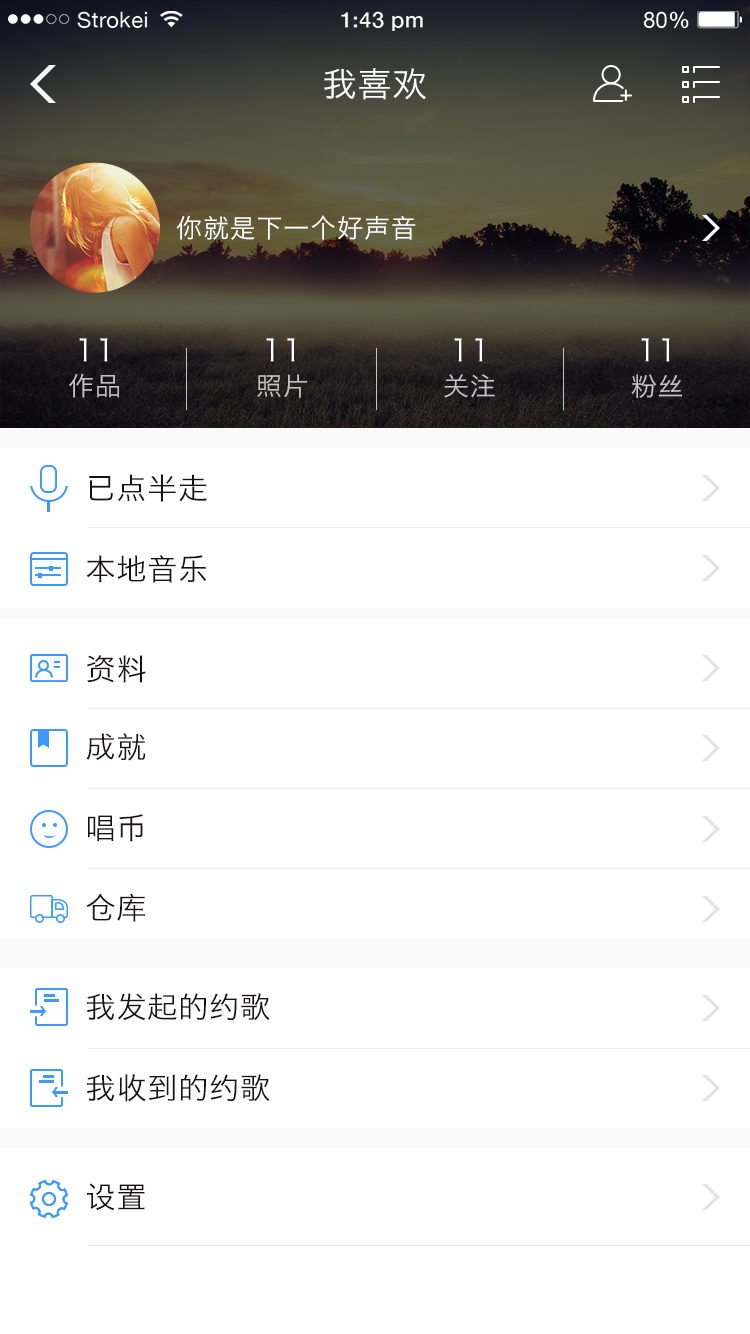
<style>
.page{position:relative;width:750px;height:1334px;background:#ffffff}
.page>*{position:absolute;margin:0}
.t1{font:34px "HiraginoSansGB-W3";letter-spacing:0.03em;color:#ffffff}
.t2{font:26px "HiraginoSansGB-W3";letter-spacing:0.03em;color:#ffffff}
.t3{font:30px "HiraginoSansGB-W3";letter-spacing:0.03em;color:#ffffff}
.t4{font:25.5px "HiraginoSansGB-W3";letter-spacing:0.03em;color:#c3c3c3}
.t5{font:25.8px "HiraginoSansGB-W3";letter-spacing:0.03em;color:#c3c3c3}
.t6{font:30px "HiraginoSansGB-W3";letter-spacing:0.03em;color:#161214}
</style>
<div class="page">
<p class="t1" style="left:324px;top:68px;width:102px;height:32px">我喜欢</p>
<p class="t2" style="left:176px;top:215px;width:240px;height:25px">你就是下一个好声音</p>
<p class="t3" style="left:79px;top:338px;width:29px;height:24px">11</p>
<p class="t3" style="left:266px;top:338px;width:29px;height:24px">11</p>
<p class="t3" style="left:454px;top:338px;width:29px;height:24px">11</p>
<p class="t3" style="left:641px;top:338px;width:29px;height:24px">11</p>
<p class="t4" style="left:69px;top:373px;width:50px;height:25px">作品</p>
<p class="t4" style="left:257px;top:374px;width:50px;height:24px">照片</p>
<p class="t4" style="left:444px;top:374px;width:51px;height:24px">关注</p>
<p class="t5" style="left:631px;top:374px;width:51px;height:24px">粉丝</p>
<p class="t6" style="left:89px;top:474px;width:118px;height:28px">已点半走</p>
<p class="t6" style="left:86px;top:555px;width:121px;height:28px">本地音乐</p>
<p class="t6" style="left:87px;top:655px;width:59px;height:28px">资料</p>
<p class="t6" style="left:86px;top:733px;width:60px;height:28px">成就</p>
<p class="t6" style="left:87px;top:814px;width:56px;height:28px">唱币</p>
<p class="t6" style="left:86px;top:893px;width:59px;height:29px">仓库</p>
<p class="t6" style="left:87px;top:993px;width:183px;height:28px">我发起的约歌</p>
<p class="t6" style="left:87px;top:1074px;width:183px;height:28px">我收到的约歌</p>
<p class="t6" style="left:87px;top:1183px;width:58px;height:28px">设置</p>
</div>
